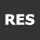
<style>
.page{position:relative;width:40px;height:40px;background:#333333}
.page>*{position:absolute;margin:0}
.t1{font:14px "Verdana-Bold";color:#ffffff;text-transform:uppercase}
</style>
<div class="page">
<p class="t1" style="left:5px;top:14px;width:30px;height:11px">RES</p>
</div>
